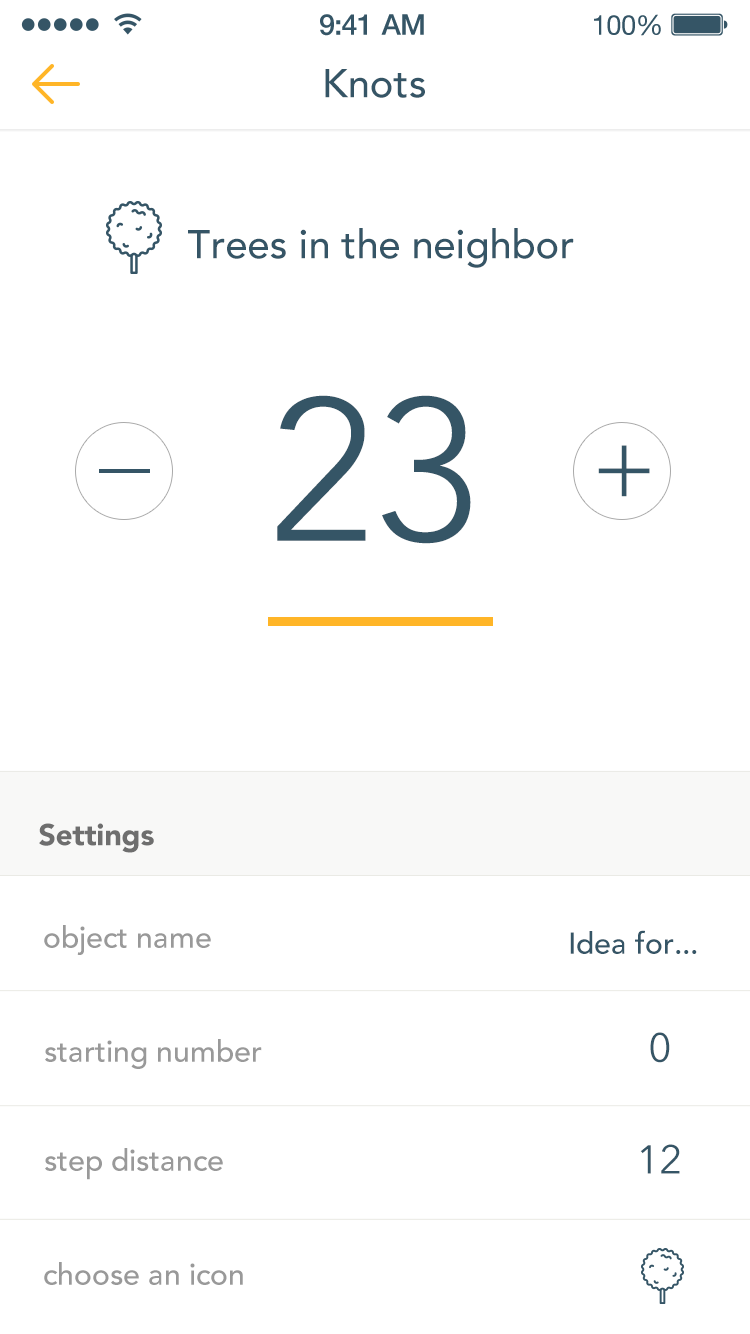
<style>
.page{position:relative;width:750px;height:1334px;background:#ffffff}
.page>*{position:absolute;margin:0}
.t1{font:28.8px "HelveticaNeue-Medium";letter-spacing:-0.02em;color:#355566}
.t2{font:27.6px "HelveticaNeue";letter-spacing:-0.02em;color:#355566}
.t3{font:40px "Avenir-Medium";color:#355566}
.t4{font:200.9px "Avenir-Light";color:#355566}
.t5{font:100px "Avenir-Light";color:#355566}
.t6{font:30px "Avenir-Black";color:#6e6e6e}
.t7{font:30px "Avenir-Medium";color:#999999}
.t8{font:30px "Avenir-Medium";color:#355566}
.t9{font:40px "AvenirNext-Regular";color:#355566}
</style>
<div class="page">
<p class="t1" style="left:320px;top:14px;width:104px;height:22px">9:41 AM</p>
<p class="t2" style="left:594px;top:14px;width:67px;height:22px">100%</p>
<p class="t3" style="left:325px;top:69px;width:100px;height:29px">Knots</p>
<p class="t3" style="left:188px;top:228px;width:386px;height:40px">Trees in the neighbor</p>
<p class="t4" style="left:277px;top:395px;width:194px;height:149px">23</p>
<p class="t5" style="left:598px;top:445px;width:52px;height:52px">+</p>
<p class="t6" style="left:39px;top:823px;width:115px;height:30px">Settings</p>
<p class="t7" style="left:44px;top:925px;width:167px;height:30px">object name</p>
<p class="t8" style="left:570px;top:930px;width:127px;height:24px">Idea for...</p>
<p class="t9" style="left:650px;top:1032px;width:20px;height:31px">0</p>
<p class="t7" style="left:45px;top:1039px;width:217px;height:30px">starting number</p>
<p class="t9" style="left:640px;top:1144px;width:40px;height:30px">12</p>
<p class="t7" style="left:45px;top:1148px;width:178px;height:32px">step distance</p>
<p class="t7" style="left:44px;top:1262px;width:199px;height:23px">choose an icon</p>
</div>
